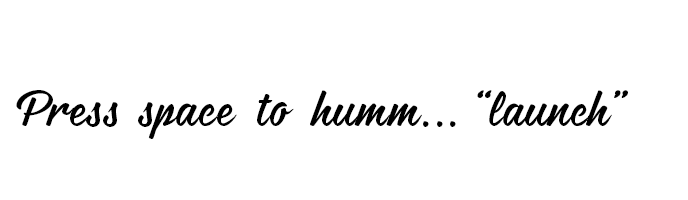
<style>
.page{position:relative;width:688px;height:200px;background:#ffffff}
.page>*{position:absolute;margin:0}
.t1{font:41.5px "Hontana";color:#000000}
</style>
<div class="page">
<p class="t1" style="left:16px;top:90px;width:612px;height:49px">Press  space  to  humm... “launch”</p>
</div>
